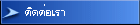
<style>
.page{position:relative;width:140px;height:25px}
.page>*{position:absolute;margin:0}
.t1{font:15.3px "EucrosiaDSE";color:#ffffff;scale:1.12 1}
</style>
<div class="page">
<p class="t1" style="left:25px;top:4px;width:40px;height:12px">µÔ´µèÍàÃÒ</p>
</div>
